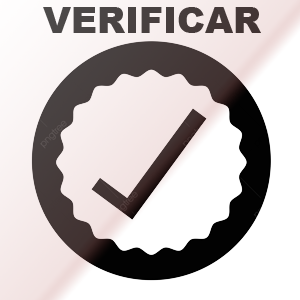
<style>
.page{position:relative;width:300px;height:300px;background:#ffffff}
.page>*{position:absolute;margin:0}
.t1{font:36px "Arial-Black";color:#484140}
</style>
<div class="page">
<p class="t1" style="left:43px;top:7px;width:218px;height:26px">VERIFICAR</p>
</div>
